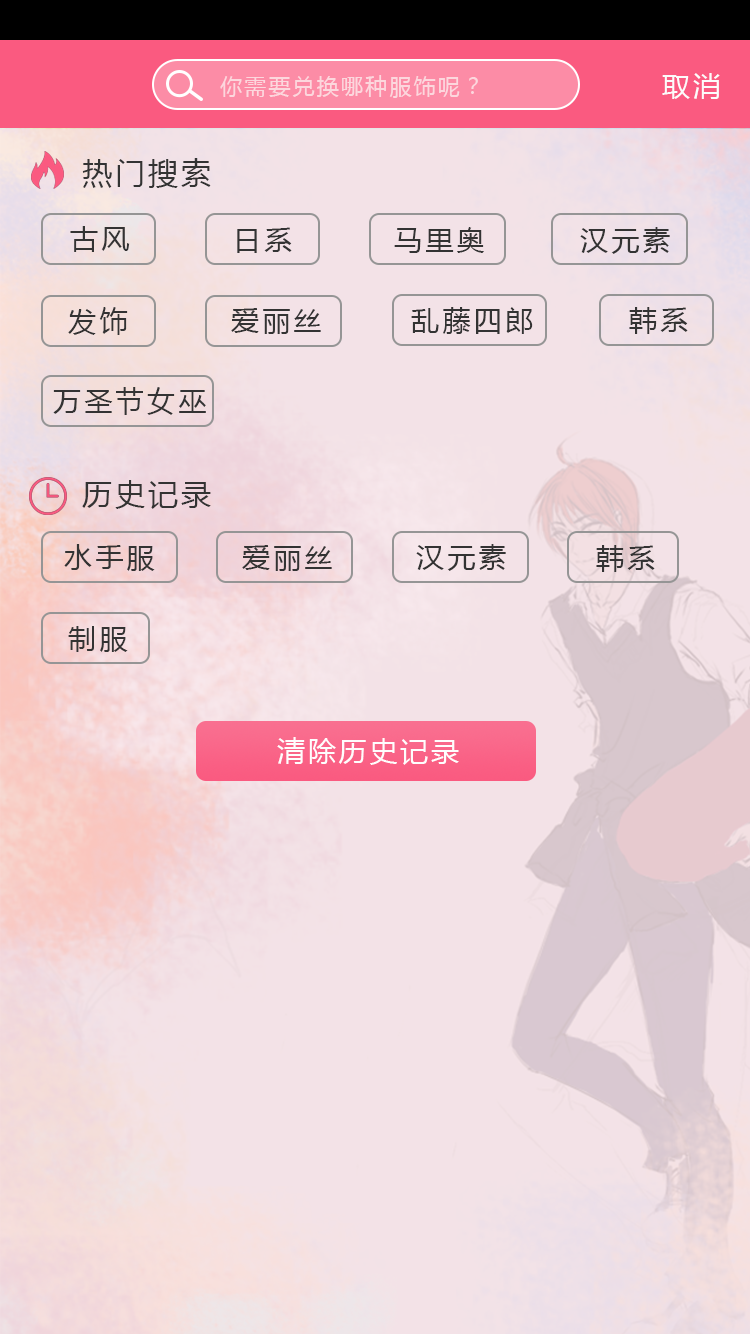
<style>
.page{position:relative;width:750px;height:1334px;background:#f3e2e7}
.page>*{position:absolute;margin:0}
.t1{font:22px "MicrosoftYaHei";letter-spacing:0.1em;color:#fcd7dd}
.t2{font:28px "MicrosoftYaHei";letter-spacing:0.1em;color:#fcfbfb}
.t3{font:30px "MicrosoftYaHei";letter-spacing:0.1em;color:#333333}
.t4{font:28px "MicrosoftYaHei";letter-spacing:0.12em;color:#333333}
.t5{font:28px "MicrosoftYaHei";letter-spacing:0.1em;color:#fefdfd}
</style>
<div class="page">
<p class="t1" style="left:220px;top:75px;width:258px;height:23px">你需要兑换哪种服饰呢？</p>
<p class="t2" style="left:662px;top:73px;width:58px;height:26px">取消</p>
<p class="t3" style="left:82px;top:158px;width:129px;height:30px">热门搜索</p>
<p class="t4" style="left:70px;top:226px;width:60px;height:26px">古风</p>
<p class="t4" style="left:237px;top:227px;width:55px;height:26px">日系</p>
<p class="t4" style="left:394px;top:227px;width:90px;height:26px">马里奥</p>
<p class="t4" style="left:580px;top:227px;width:90px;height:27px">汉元素</p>
<p class="t4" style="left:68px;top:307px;width:60px;height:28px">发饰</p>
<p class="t4" style="left:231px;top:308px;width:90px;height:26px">爱丽丝</p>
<p class="t4" style="left:411px;top:307px;width:122px;height:27px">乱藤四郎</p>
<p class="t4" style="left:629px;top:307px;width:59px;height:27px">韩系</p>
<p class="t4" style="left:53px;top:387px;width:153px;height:28px">万圣节女巫</p>
<p class="t3" style="left:82px;top:480px;width:129px;height:29px">历史记录</p>
<p class="t4" style="left:64px;top:544px;width:91px;height:27px">水手服</p>
<p class="t4" style="left:242px;top:545px;width:90px;height:26px">爱丽丝</p>
<p class="t4" style="left:416px;top:544px;width:90px;height:27px">汉元素</p>
<p class="t4" style="left:596px;top:545px;width:59px;height:27px">韩系</p>
<p class="t4" style="left:68px;top:626px;width:60px;height:26px">制服</p>
<p class="t5" style="left:277px;top:737px;width:182px;height:28px">清除历史记录</p>
</div>
